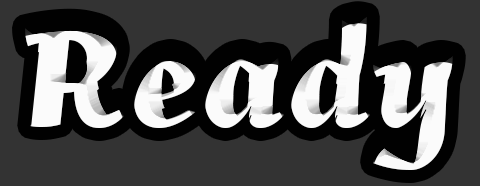
<style>
.page{position:relative;width:480px;height:186px;background:#333333}
.page>*{position:absolute;margin:0}
.t1{font:150px "ArekLatn-EbIt";letter-spacing:0.025em;color:#ffffff}
</style>
<div class="page">
<p class="t1" style="left:25px;top:14px;width:428px;height:156px">Ready</p>
</div>
